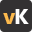
<style>
.page{position:relative;width:32px;height:32px;background:#333132}
.page>*{position:absolute;margin:0}
.t1{font:22.2px "Ebrima-Bold";color:#fdba4d}
.t2{font:22.2px "Ebrima-Bold";color:#ffffff}
</style>
<div class="page">
<p class="t1" style="left:3px;top:9px;width:26px;height:15px">v<span class="t2">K</span></p>
</div>
